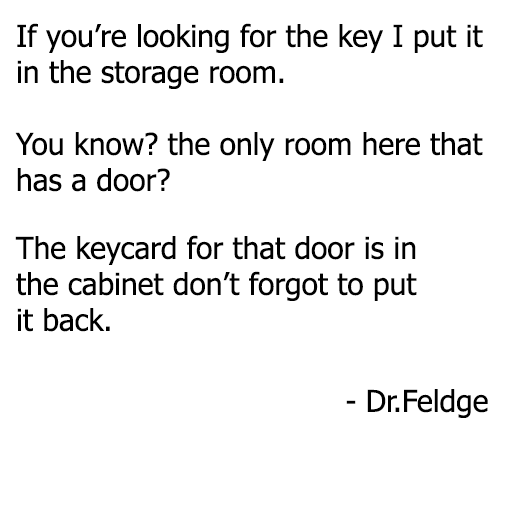
<style>
.page{position:relative;width:512px;height:512px;background:#ffffff}
.page>*{position:absolute;margin:0}
.t1{font:30px "Tahoma";color:#000000}
</style>
<div class="page">
<p class="t1" style="left:15px;top:23px;width:468px;height:169px;text-align:right">If you’re looking for the key I put it in the storage room. <br><br>You know? the only room here that has a door?</p>
<p class="t1" style="left:15px;top:235px;width:402px;height:97px;text-align:right">The keycard for that door is in the cabinet don’t forgot to put it back.</p>
<p class="t1" style="left:346px;top:389px;width:142px;height:29px">- Dr.Feldge</p>
</div>
